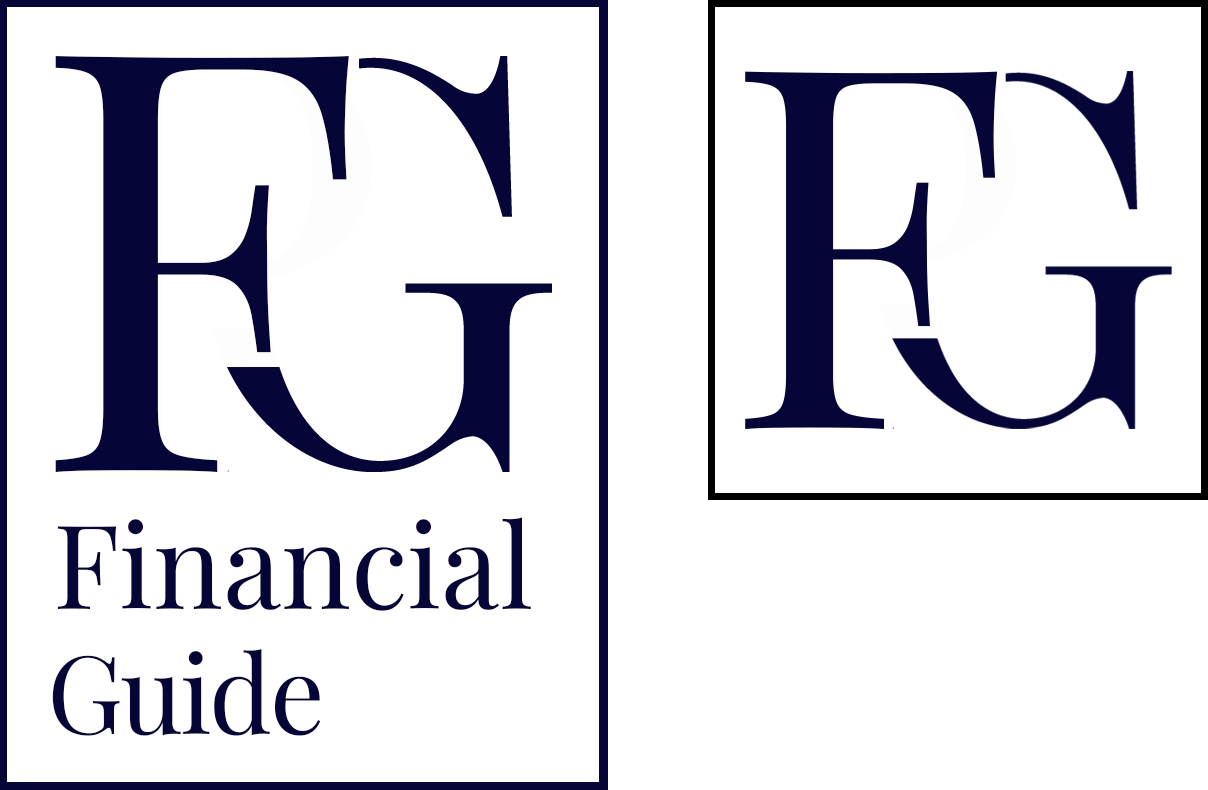
<style>
.page{position:relative;width:1208px;height:790px;background:#ffffff}
.page>*{position:absolute;margin:0}
.t1{font:587.5px "PlayfairDisplay-Regular";letter-spacing:-0.025em;color:#050538}
.t2{font:504.7px "PlayfairDisplay-Regular";letter-spacing:-0.025em;color:#050538}
.t3{font:116.7px "PlayfairDisplay-Regular";color:#050538}
.t4{font:108.3px "PlayfairDisplay-Regular";letter-spacing:-0.025em;color:#050538}
</style>
<div class="page">
<p class="t1" style="left:55px;top:56px;width:294px;height:416px">F</p>
<p class="t2" style="left:745px;top:71px;width:253px;height:358px">F</p>
<p class="t3" style="left:57px;top:517px;width:474px;height:94px">Financial</p>
<p class="t4" style="left:52px;top:649px;width:269px;height:87px">Guide</p>
</div>
